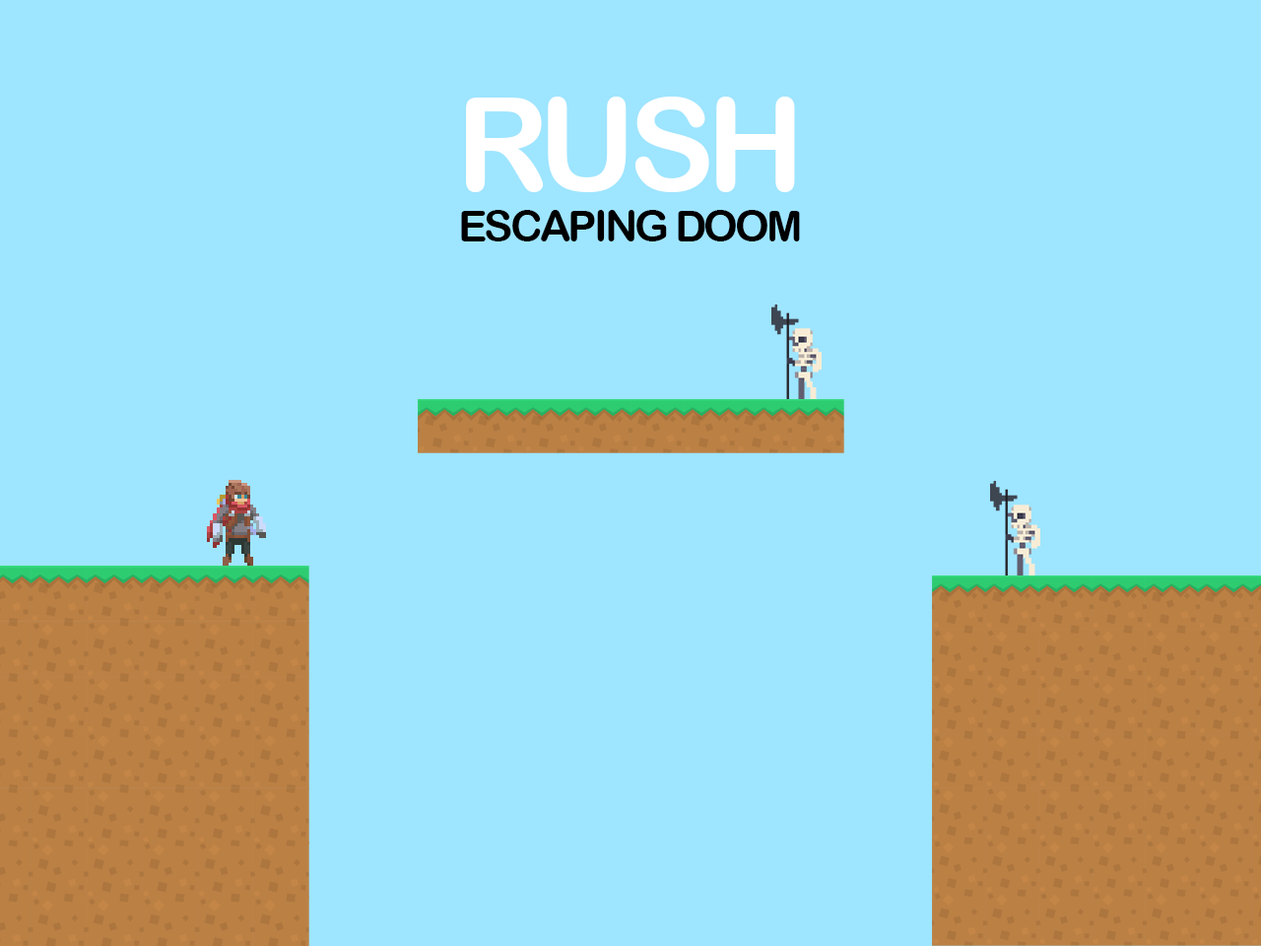
<style>
.page{position:relative;width:1261px;height:946px;background:#9ee5ff}
.page>*{position:absolute;margin:0}
.t1{font:43px "ArialRoundedMTBold";letter-spacing:-0.06em;color:#000000}
.t2{font:129.1px "ArialRoundedMTBold";letter-spacing:-0.06em;color:#ffffff}
</style>
<div class="page">
<p class="t1" style="left:461px;top:97px;width:339px;height:144px;text-align:center"><span class="t2">RUSH <br></span>ESCAPING DOOM</p>
</div>
